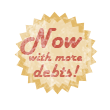
<style>
.page{position:relative;width:110px;height:110px;background:#ffffff}
.page>*{position:absolute;margin:0}
.t1{font:30px "HarlowSolid"}
.t2{font:14px/16px "HarlowSolid"}
.t3{font:20px/16px "HarlowSolid"}
</style>
<div class="page">
<p class="t1" style="left:20px;top:28px;width:63px;height:27px">Now</p>
<p class="t2" style="left:28px;top:52px;width:55px;height:25px;text-align:center">with more<br><span class="t3">debts!</span></p>
</div>
